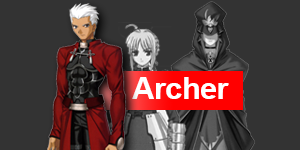
<style>
.page{position:relative;width:300px;height:150px;background:#333333}
.page>*{position:absolute;margin:0}
.t1{font:31.2px "Arial-BoldMT";letter-spacing:-0.025em;color:#ffffff}
</style>
<div class="page">
<p class="t1" style="left:132px;top:77px;width:97px;height:22px">Archer</p>
</div>
